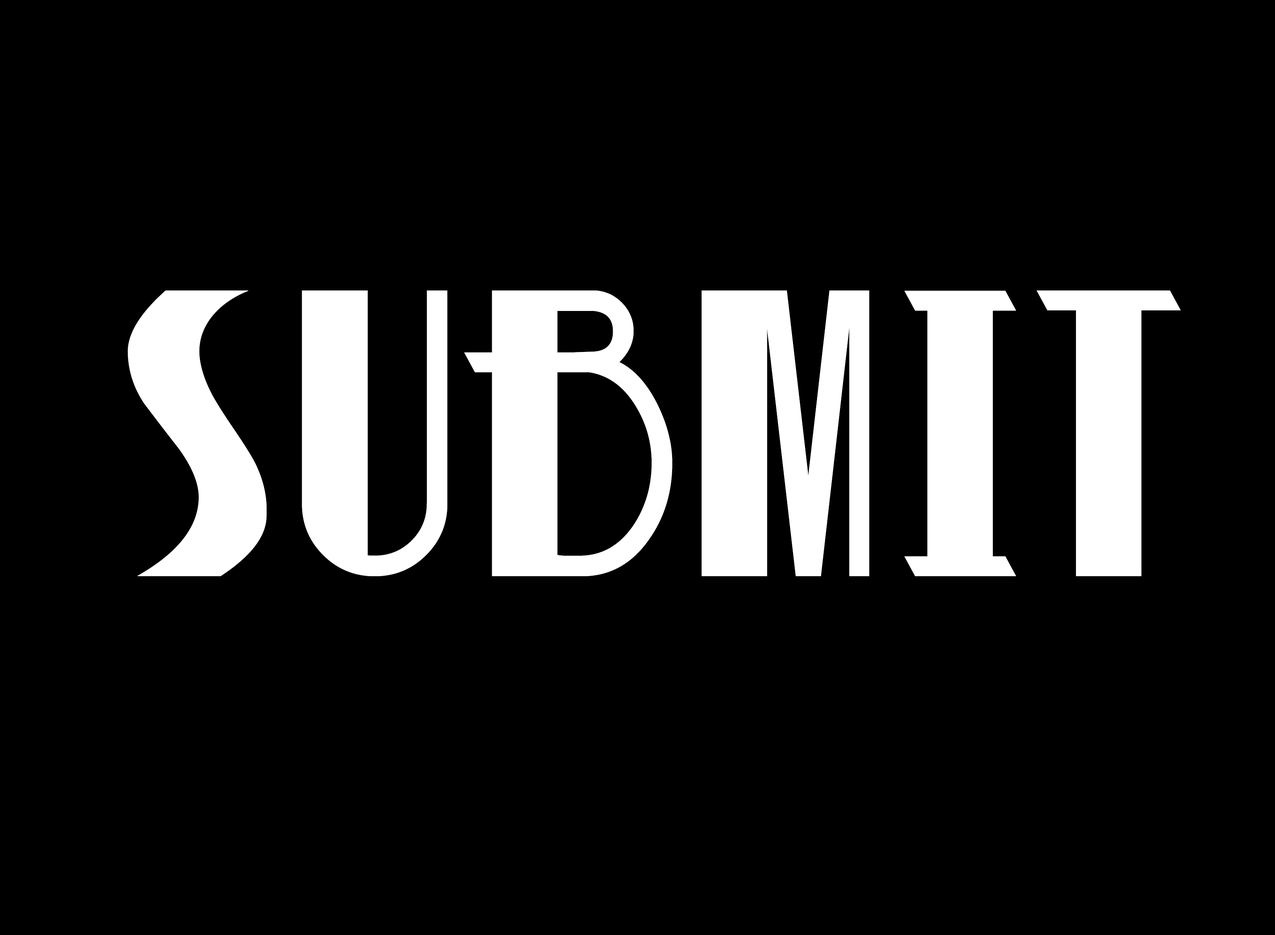
<style>
.page{position:relative;width:1275px;height:935px;background:#000000}
.page>*{position:absolute;margin:0}
.t1{font:356.1px "BettyNoir";color:#ffffff}
</style>
<div class="page">
<p class="t1" style="left:128px;top:291px;width:1053px;height:285px">SUBMIT</p>
</div>
